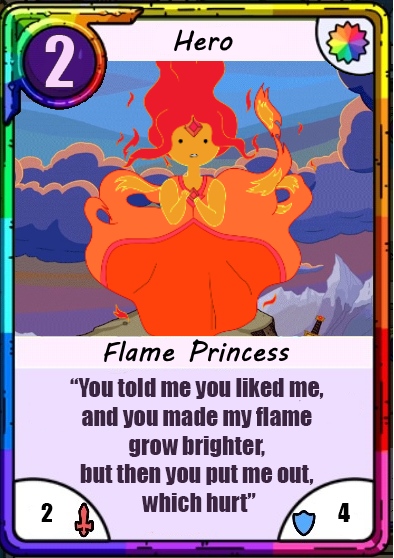
<style>
.page{position:relative;width:394px;height:558px}
.page>*{position:absolute;margin:0}
.t1{font:66.7px "Impact";color:#f8d4fa}
.t2{font:24px "Impact";color:#3b2440}
.t3{font:24px "Impact";color:#000000}
</style>
<div class="page">
<p class="t1" style="left:44px;top:34px;width:31px;height:54px">2</p>
<p class="t2" style="left:70px;top:378px;width:254px;height:134px;text-align:center">“You told me you liked me, <br>and you made my flame <br>grow brighter, <br>but then you put me out, <br>which hurt”</p>
<p class="t3" style="left:41px;top:503px;width:12px;height:19px">2</p>
<p class="t3" style="left:338px;top:503px;width:12px;height:19px">4</p>
</div>
